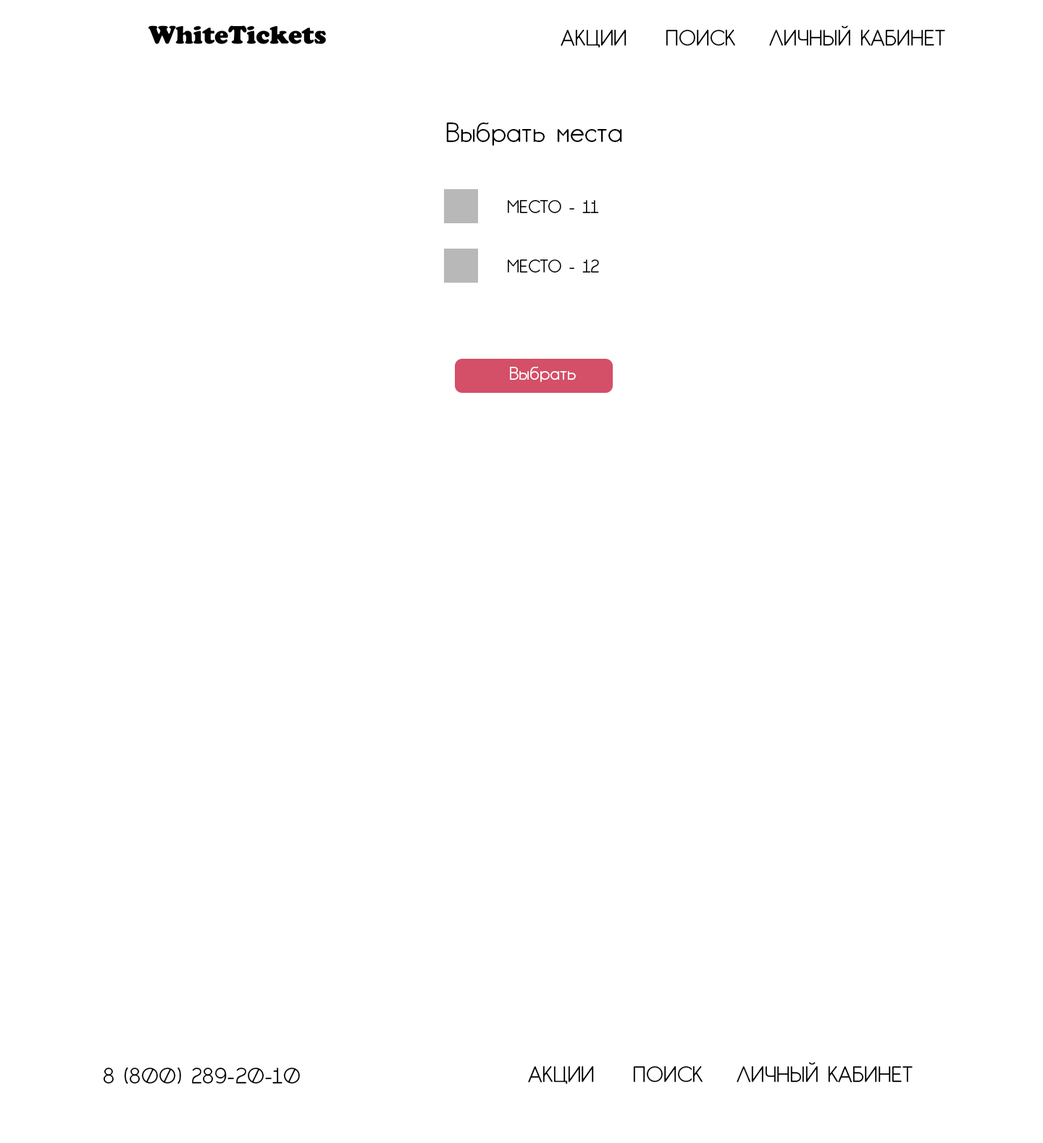
<style>
.page{position:relative;width:1043px;height:1143px;background:#ffffff}
.page>*{position:absolute;margin:0}
.t1{font:21.7px "GardensC";color:#000000}
.t2{font:26.1px "GardensC";color:#000000}
.t3{font:17.4px "GardensC";color:#010101}
.t4{font:17.4px "GardensC";color:#ffffff}
</style>
<div class="page">
<p class="t1" style="left:561px;top:25px;width:385px;height:23px">АКЦИИ  ПОИСК  ЛИЧНЫЙ КАБИНЕТ</p>
<p class="t2" style="left:446px;top:122px;width:176px;height:24px">Выбрать места</p>
<p class="t3" style="left:508px;top:200px;width:91px;height:13px">МЕСТО - 11</p>
<p class="t3" style="left:508px;top:259px;width:91px;height:13px">МЕСТО - 12</p>
<p class="t4" style="left:510px;top:366px;width:66px;height:16px">Выбрать</p>
<p class="t1" style="left:528px;top:1062px;width:385px;height:22px">АКЦИИ  ПОИСК  ЛИЧНЫЙ КАБИНЕТ</p>
<p class="t1" style="left:103px;top:1067px;width:197px;height:17px">8 (800) 289-20-10</p>
</div>
